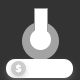
<style>
.page{position:relative;width:80px;height:80px;background:#333333}
.page>*{position:absolute;margin:0}
.t1{font:8.9px "Arial-Black";color:#ffffff}
</style>
<div class="page">
<p class="t1" style="left:15px;top:64px;width:7px;height:9px">$</p>
</div>
